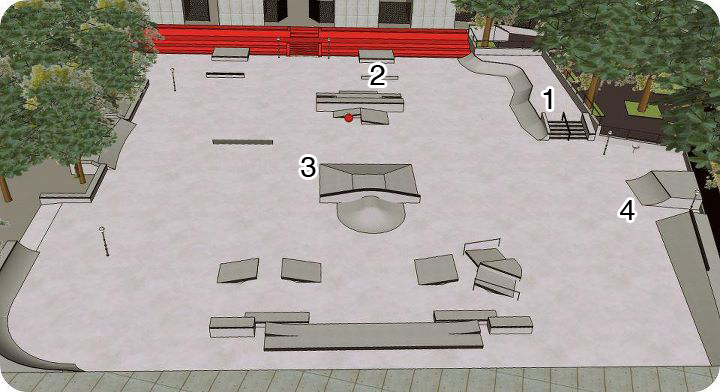
<style>
.page{position:relative;width:720px;height:392px}
.page>*{position:absolute;margin:0}
.t1{font:28.9px "Helvetica";letter-spacing:-0.01em;color:#000000}
</style>
<div class="page">
<p class="t1" style="left:370px;top:65px;width:15px;height:20px">2</p>
<p class="t1" style="left:543px;top:89px;width:9px;height:20px">1</p>
<p class="t1" style="left:301px;top:157px;width:15px;height:20px">3</p>
<p class="t1" style="left:620px;top:200px;width:15px;height:20px">4</p>
</div>
